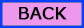
<style>
.page{position:relative;width:84px;height:28px;background:#ee98ed}
.page>*{position:absolute;margin:0}
.t1{font:17px "Verdana";color:#000000;font-weight:bold}
</style>
<div class="page">
<p class="t1" style="left:19px;top:7px;width:48px;height:13px">BACK</p>
</div>
